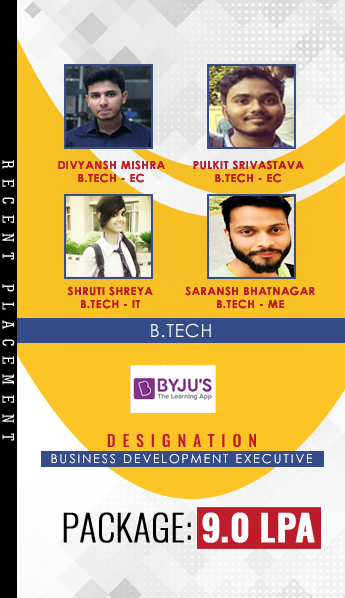
<style>
.page{position:relative;width:345px;height:598px}
.page>*{position:absolute;margin:0}
.t1{font:16.7px "GeometricSlab703BT-MediumCond";letter-spacing:0.6em;color:#ffffff;text-transform:uppercase}
.t2{font:11.3px "CenturyGothic-Bold";letter-spacing:0.04em;color:#be1c2b;text-transform:uppercase}
.t3{font:17.9px "CenturyGothic";letter-spacing:0.04em;color:#ffffff;text-transform:uppercase}
.t4{font:16.1px "Oswald-Medium";letter-spacing:0.42em;color:#be1c2b;text-transform:uppercase}
.t5{font:12.2px "CenturyGothic";letter-spacing:0.16em;color:#fefefe;text-transform:uppercase}
.t6{font:35.9px "Oswald-ExtraLight";color:#000000;text-transform:uppercase;font-weight:bold}
.t7{font:35.9px "Oswald-DemiBold";color:#ffffff;text-transform:uppercase;font-weight:bold}
</style>
<div class="page">
<p class="t1" style="left:2px;top:160px;width:13px;height:281px;rotate:90deg">recent placement</p>
<p class="t2" style="left:58px;top:160px;width:107px;height:23px;text-align:center">Divyansh Mishra<br>B.Tech - EC</p>
<p class="t2" style="left:193px;top:160px;width:111px;height:23px;text-align:center">Pulkit Srivastava<br>B.Tech - EC</p>
<p class="t2" style="left:67px;top:286px;width:86px;height:23px;text-align:center">Shruti Shreya <br>B.Tech - IT</p>
<p class="t2" style="left:185px;top:286px;width:130px;height:23px;text-align:center">Saransh Bhatnagar<br>B.Tech - ME</p>
<p class="t3" style="left:151px;top:323px;width:60px;height:15px">B.TECH</p>
<p class="t4" style="left:107px;top:433px;width:149px;height:15px">DESIGNATION</p>
<p class="t5" style="left:51px;top:454px;width:261px;height:10px">BUSINESS DEVELOPMENT EXECUTIVE</p>
<p class="t6" style="left:63px;top:512px;width:252px;height:31px">package: <span class="t7">9.0 LPA</span></p>
</div>
